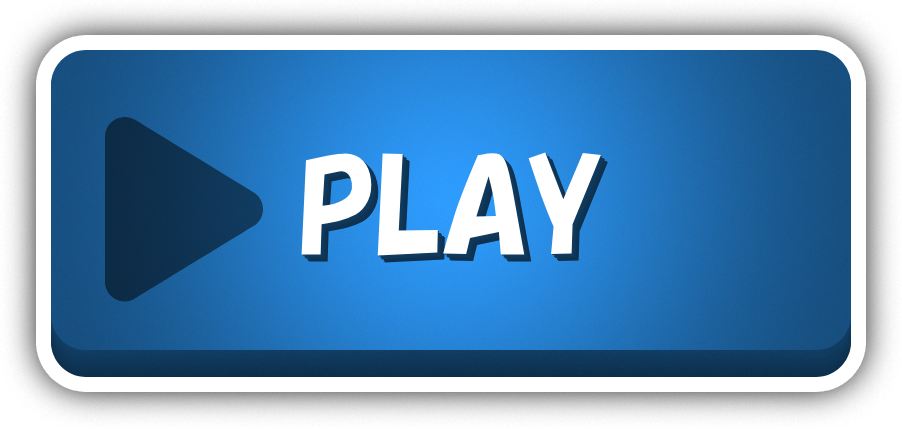
<style>
.page{position:relative;width:902px;height:429px}
.page>*{position:absolute;margin:0}
.t1{font:125px "HGPSoeiKakupoptai";color:#ffffff}
</style>
<div class="page">
<p class="t1" style="left:301px;top:152px;width:300px;height:104px">PLAY</p>
</div>
